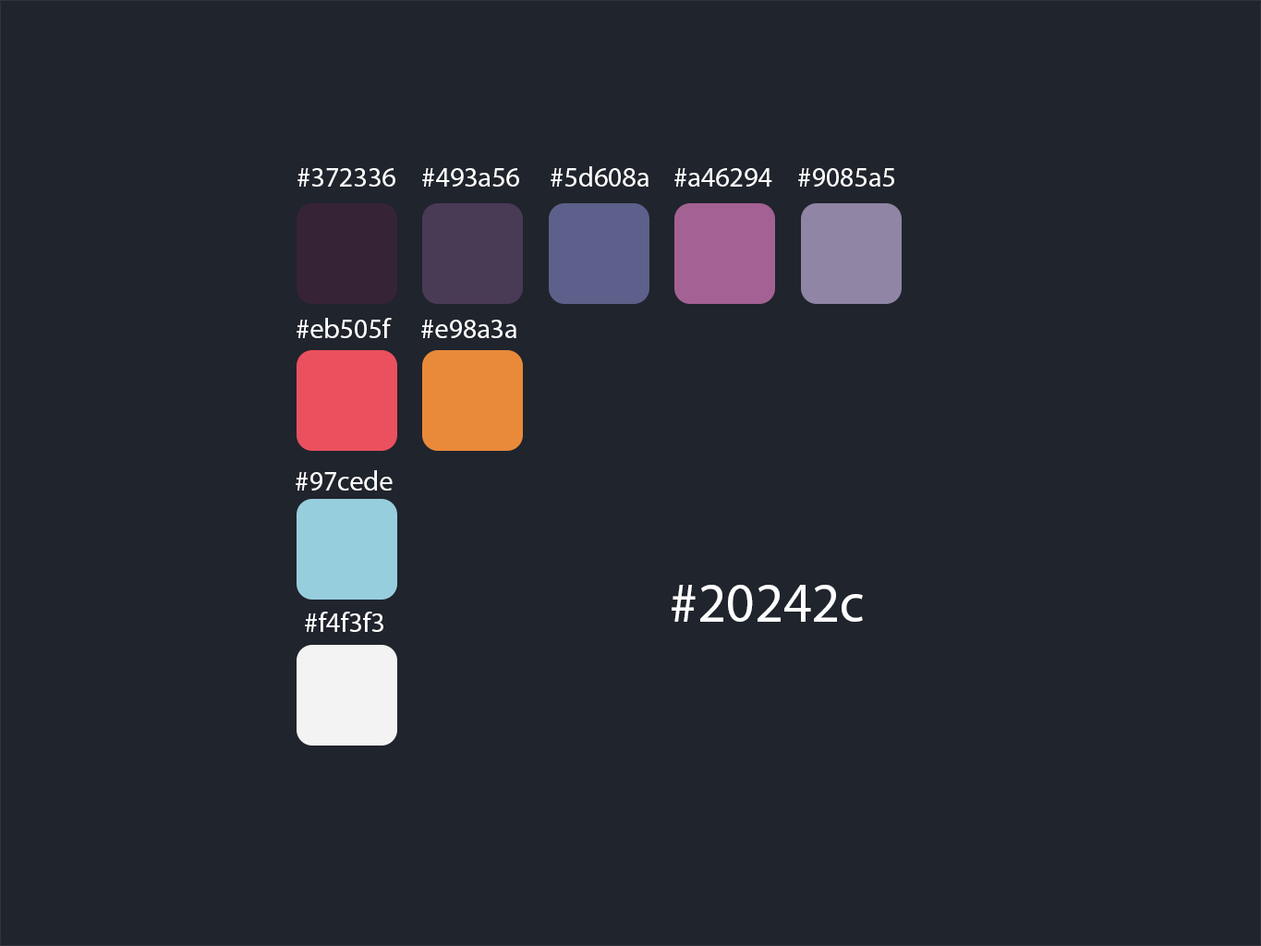
<style>
.page{position:relative;width:1261px;height:946px;background:#20242c}
.page>*{position:absolute;margin:0}
.t1{font:27.7px "MyriadPro-Regular";color:#ffffff}
.t2{font:55.4px "MyriadPro-Regular";color:#ffffff}
</style>
<div class="page">
<p class="t1" style="left:297px;top:168px;width:98px;height:19px">#372336</p>
<p class="t1" style="left:422px;top:168px;width:97px;height:19px">#493a56</p>
<p class="t1" style="left:550px;top:166px;width:98px;height:21px">#5d608a</p>
<p class="t1" style="left:674px;top:168px;width:98px;height:19px">#a46294</p>
<p class="t1" style="left:798px;top:168px;width:96px;height:19px">#9085a5</p>
<p class="t1" style="left:296px;top:318px;width:96px;height:20px">#eb505f</p>
<p class="t1" style="left:421px;top:320px;width:95px;height:18px">#e98a3a</p>
<p class="t1" style="left:296px;top:470px;width:97px;height:20px">#97cede</p>
<p class="t2" style="left:671px;top:585px;width:192px;height:37px">#20242c</p>
<p class="t1" style="left:305px;top:611px;width:78px;height:21px">#f4f3f3</p>
</div>
